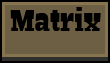
<style>
.page{position:relative;width:110px;height:63px;background:#6d5f43}
.page>*{position:absolute;margin:0}
.t1{font:33px "Bigfish-Black";color:#000000;scale:0.71 1}
</style>
<div class="page">
<p class="t1" style="left:10px;top:7px;width:91px;height:24px">Matrix</p>
</div>
